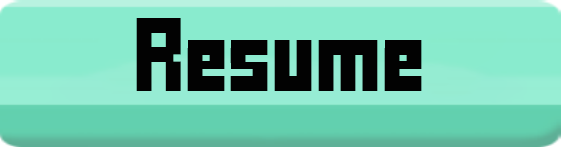
<style>
.page{position:relative;width:561px;height:147px;background:#89ebce}
.page>*{position:absolute;margin:0}
.t1{font:58.3px "FFFForward";color:#020202}
</style>
<div class="page">
<p class="t1" style="left:136px;top:18px;width:286px;height:73px">Resume</p>
</div>
